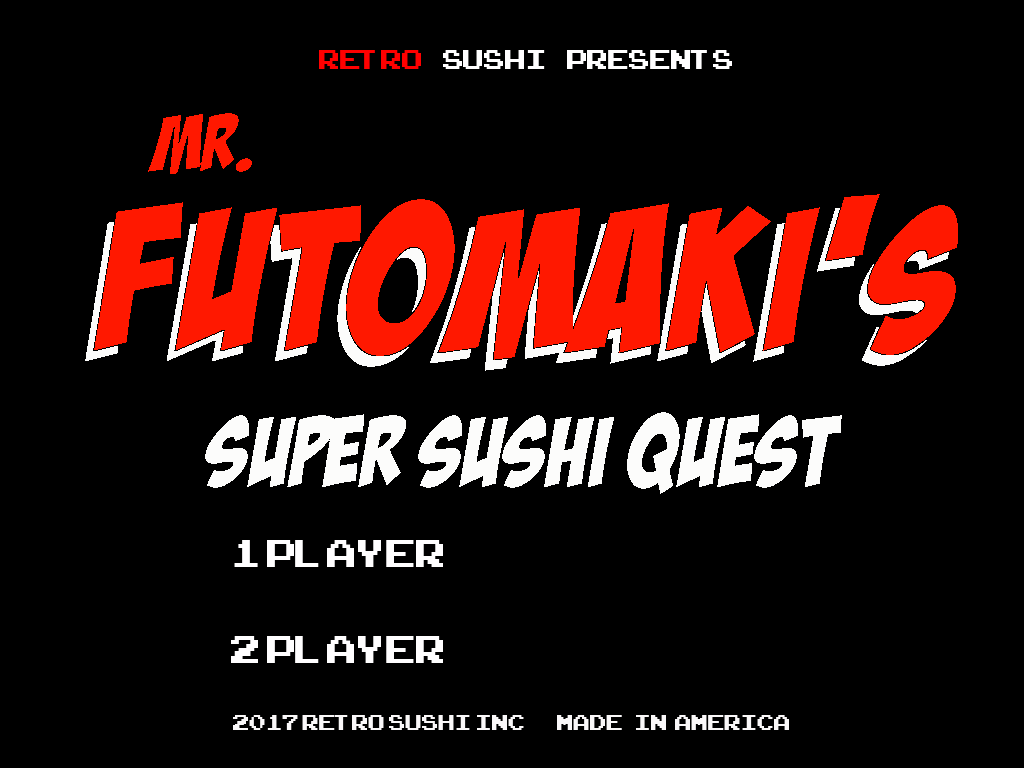
<style>
.page{position:relative;width:1024px;height:768px;background:#000000}
.page>*{position:absolute;margin:0}
.t1{font:38px "ArcadeClassic";color:#fffeff}
.t2{font:38px "ArcadeClassic";color:#ff0000}
.t3{font:54px/96px "ArcadeClassic";color:#fffeff}
.t4{font:30px "ArcadeClassic";color:#faf8f9}
</style>
<div class="page">
<p class="t1" style="left:319px;top:50px;width:413px;height:19px"><span class="t2">retro</span>    sushi    presents</p>
<p class="t3" style="left:231px;top:540px;width:212px;height:123px">1 Player<br>2 player</p>
<p class="t4" style="left:233px;top:715px;width:556px;height:15px">2017 Retro sushi inc Made   in  america</p>
</div>
